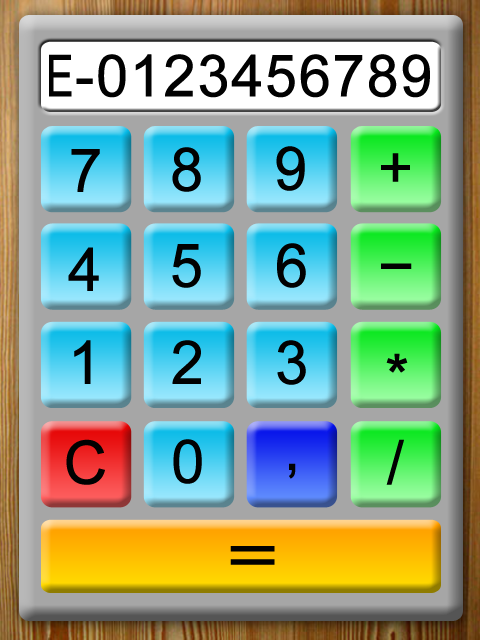
<style>
.page{position:relative;width:480px;height:640px}
.page>*{position:absolute;margin:0}
.t1{font:58px "ArialMT";color:#010101;font-weight:bold}
.t2{font:58px "ArialMT";color:#010101;font-weight:bold;scale:0.72 1}
.t3{font:60px "ArialMT";color:#010101;font-weight:bold}
.t4{font:60px "ArialMT";color:#010101;font-weight:bold;scale:1.81 1}
.t5{font:60px "ArialMT";color:#010101;font-weight:bold;scale:1.52 1}
</style>
<div class="page">
<p class="t1" style="left:49px;top:54px;width:381px;height:44px"><span class="t2">E</span>-0123456789</p>
<p class="t3" style="left:71px;top:149px;width:29px;height:43px">7</p>
<p class="t3" style="left:172px;top:147px;width:29px;height:45px">8</p>
<p class="t3" style="left:276px;top:146px;width:29px;height:45px">9</p>
<p class="t3" style="left:381px;top:153px;width:29px;height:29px">+</p>
<p class="t3" style="left:172px;top:244px;width:29px;height:44px">5</p>
<p class="t3" style="left:277px;top:243px;width:29px;height:45px">6</p>
<p class="t3" style="left:68px;top:247px;width:31px;height:44px">4</p>
<p class="t4" style="left:381px;top:263px;width:31px;height:6px">-</p>
<p class="t3" style="left:74px;top:340px;width:17px;height:44px">1</p>
<p class="t3" style="left:172px;top:340px;width:29px;height:44px">2</p>
<p class="t3" style="left:277px;top:340px;width:29px;height:45px">3</p>
<p class="t3" style="left:386px;top:353px;width:22px;height:20px">*</p>
<p class="t3" style="left:66px;top:439px;width:39px;height:46px">C</p>
<p class="t3" style="left:173px;top:439px;width:29px;height:45px">0</p>
<p class="t3" style="left:386px;top:439px;width:18px;height:46px">/</p>
<p class="t3" style="left:289px;top:463px;width:7px;height:16px">,</p>
<p class="t5" style="left:230px;top:546px;width:45px;height:19px">=</p>
</div>
